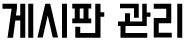
<style>
.page{position:relative;width:184px;height:41px;background:#ffffff}
.page>*{position:absolute;margin:0}
.t1{font:36px "BMDoHyeon";color:#000000}
</style>
<div class="page">
<p class="t1" style="left:2px;top:3px;width:181px;height:35px">게시판 관리</p>
</div>
